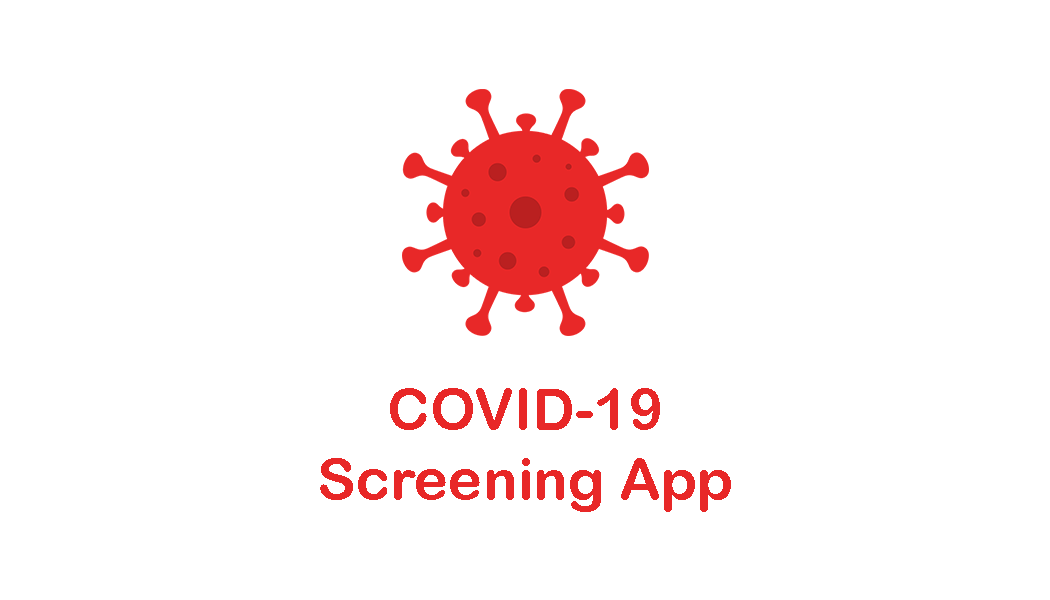
<style>
.page{position:relative;width:1050px;height:600px;background:#ffffff}
.page>*{position:absolute;margin:0}
.t1{font:57.9px "ArialRoundedMTBold";color:#e82828}
</style>
<div class="page">
<p class="t1" style="left:320px;top:388px;width:411px;height:124px;text-align:center">COVID-19<br>Screening App</p>
</div>
